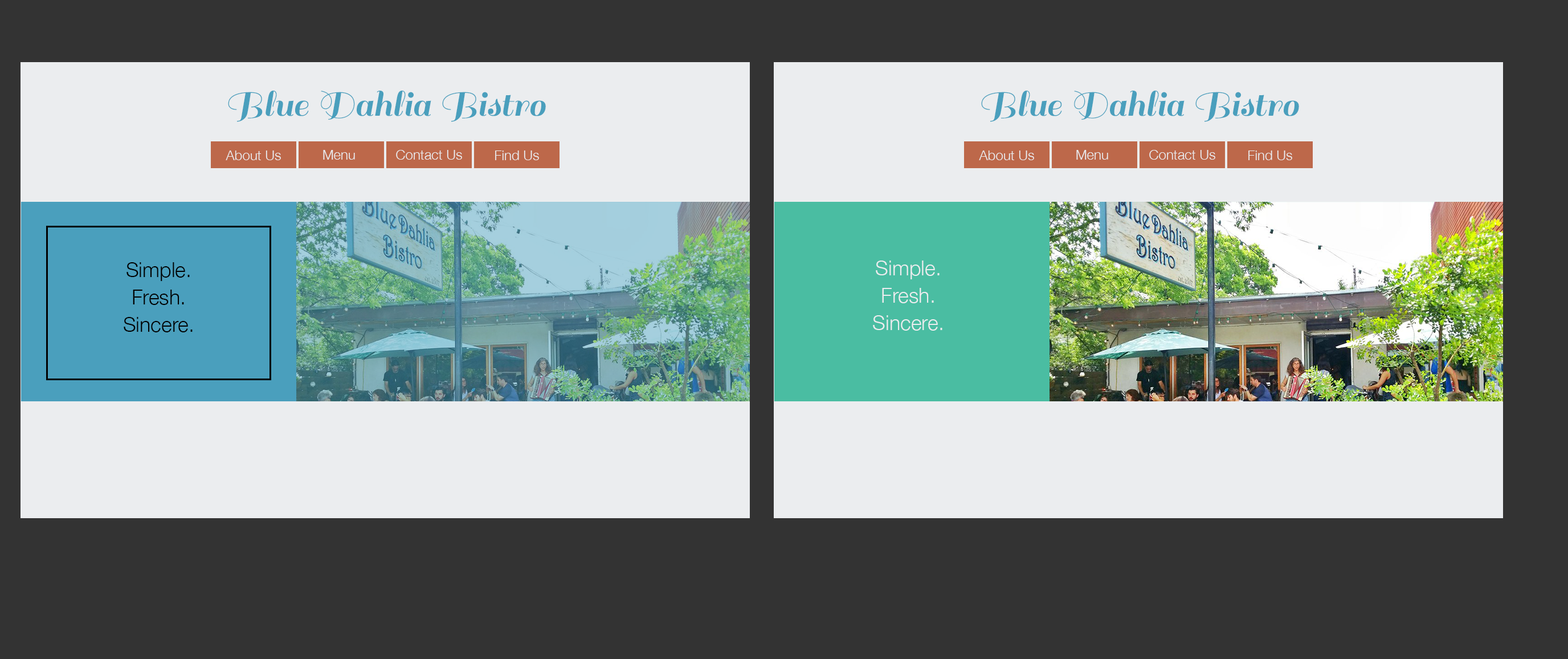
<style>
.page{position:relative;width:1568px;height:659px;background:#333333}
.page>*{position:absolute;margin:0}
.t1{font:38.7px "Sail-Regular";color:#4a9fbd}
.t2{font:13.7px "HelveticaNeue-Light";color:#ebedef}
.t3{font:20.5px/27.3px "HelveticaNeue-Light";color:#010101}
.t4{font:20.5px/27.3px "HelveticaNeue-Light";color:#ebedef}
</style>
<div class="page">
<p class="t1" style="left:228px;top:91px;width:318px;height:31px">Blue Dahlia Bistro</p>
<p class="t1" style="left:981px;top:91px;width:318px;height:31px">Blue Dahlia Bistro</p>
<p class="t2" style="left:323px;top:150px;width:32px;height:10px">Menu</p>
<p class="t2" style="left:396px;top:150px;width:66px;height:10px">Contact Us</p>
<p class="t2" style="left:1076px;top:150px;width:32px;height:10px">Menu</p>
<p class="t2" style="left:1149px;top:150px;width:66px;height:10px">Contact Us</p>
<p class="t2" style="left:226px;top:150px;width:55px;height:10px">About Us</p>
<p class="t2" style="left:495px;top:150px;width:44px;height:10px">Find Us</p>
<p class="t2" style="left:979px;top:150px;width:55px;height:10px">About Us</p>
<p class="t2" style="left:1248px;top:150px;width:44px;height:10px">Find Us</p>
<p class="t3" style="left:124px;top:262px;width:69px;height:70px;text-align:center">Simple.<br>Fresh.<br>Sincere.</p>
<p class="t4" style="left:873px;top:260px;width:69px;height:70px;text-align:center">Simple.<br>Fresh.<br>Sincere.</p>
</div>
